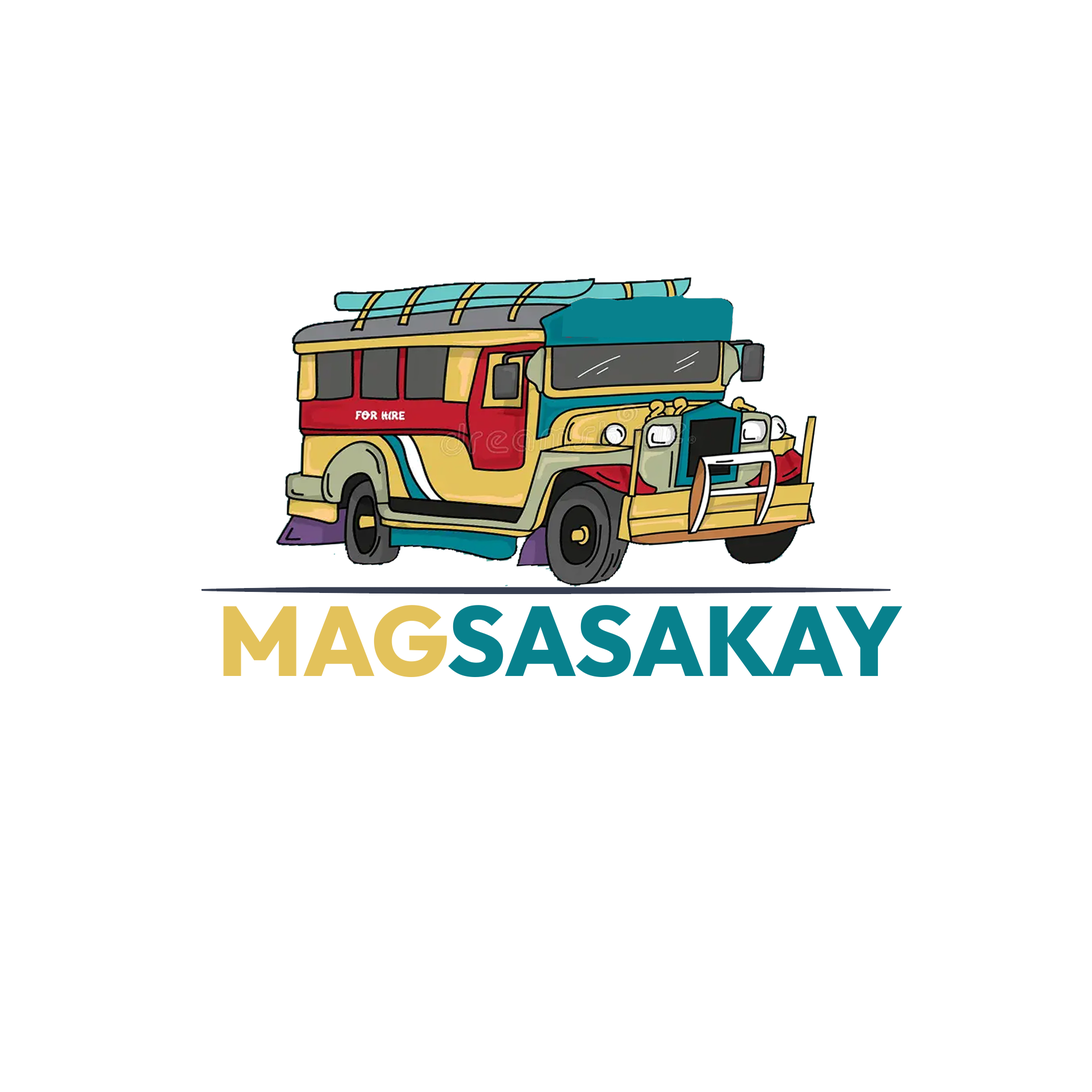
<style>
.page{position:relative;width:1092px;height:1092px;background:#ffffff}
.page>*{position:absolute;margin:0}
.t1{font:98.3px "Outfit-ExtraBold";color:#08818d}
.t2{font:98.3px "Outfit-ExtraBold";color:#e3c25b}
</style>
<div class="page">
<p class="t1" style="left:223px;top:605px;width:680px;height:72px"><span class="t2">MAG</span>SASAKAY</p>
</div>
